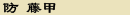
<style>
.page{position:relative;width:130px;height:15px;background:#ebe3bc}
.page>*{position:absolute;margin:0}
.t1{font:16px "LiSu";letter-spacing:-0.025em;color:#000000}
</style>
<div class="page">
<p class="t1" style="left:3px;top:2px;width:53px;height:11px">防 藤甲</p>
</div>
